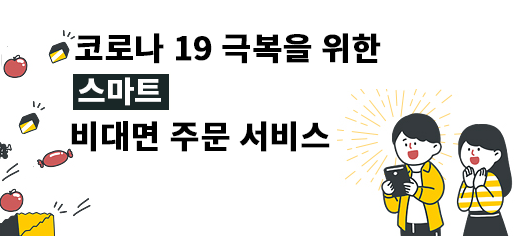
<style>
.page{position:relative;width:530px;height:236px;background:#ffffff}
.page>*{position:absolute;margin:0}
.t1{font:32px "NotoSansKR-Bold";color:#000000;font-weight:bold}
.t2{font:30px "NotoSansKR-Bold";color:#ffffff;font-weight:bold}
</style>
<div class="page">
<p class="t1" style="left:75px;top:33px;width:306px;height:31px">코로나 19 극복을 위한</p>
<p class="t2" style="left:78px;top:77px;width:83px;height:29px">스마트</p>
<p class="t1" style="left:71px;top:121px;width:259px;height:31px">비대면 주문 서비스</p>
</div>
